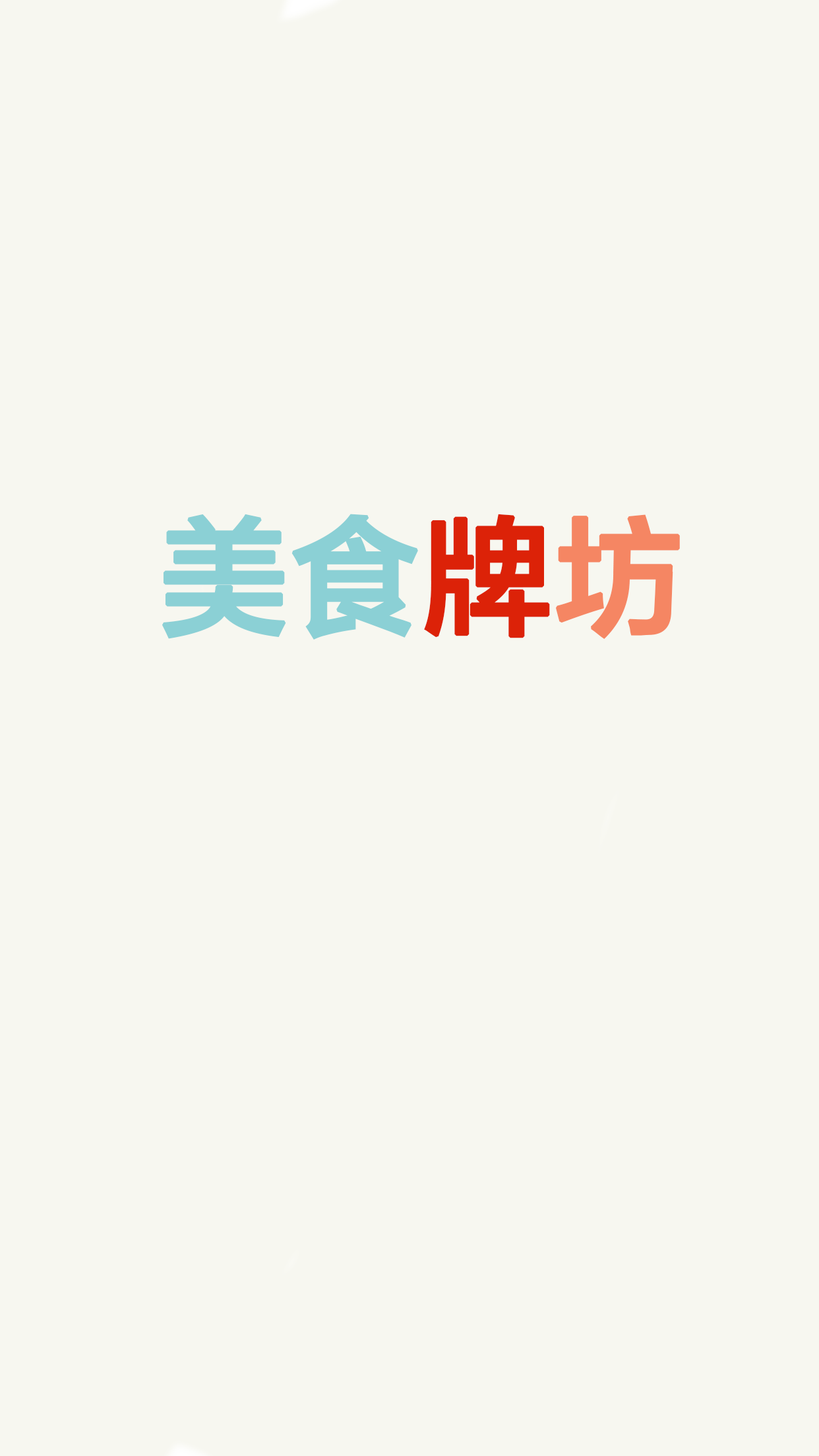
<style>
.page{position:relative;width:819px;height:1456px;background:#f7f7f0}
.page>*{position:absolute;margin:0}
.t1{font:127.9px "FZLTZHK--GBK1-0";color:#8bd0d5;font-weight:bold}
.t2{font:127.9px "FZLTZHK--GBK1-0";color:#dc2208;font-weight:bold}
.t3{font:127.9px "FZLTZHK--GBK1-0";color:#f58663;font-weight:bold}
</style>
<div class="page">
<p class="t1" style="left:162px;top:514px;width:518px;height:126px">美食<span class="t2">牌</span><span class="t3">坊</span></p>
</div>
